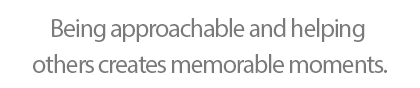
<style>
.page{position:relative;width:420px;height:88px;background:#ffffff}
.page>*{position:absolute;margin:0}
.t1{font:26px/36px "MyriadPro-Regular";letter-spacing:-0.05em;color:#7a7a7a}
</style>
<div class="page">
<p class="t1" style="left:33px;top:18px;width:354px;height:55px;text-align:center">Being approachable and helping <br>others creates memorable moments.</p>
</div>
